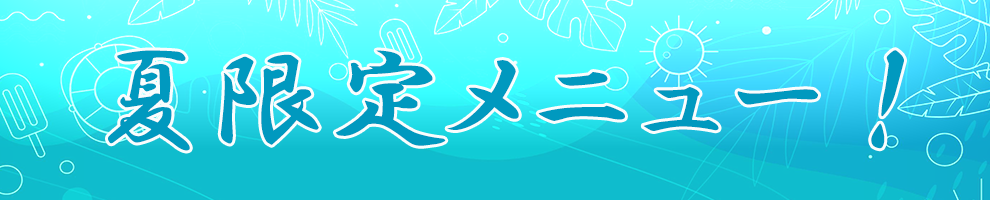
<style>
.page{position:relative;width:990px;height:200px}
.page>*{position:absolute;margin:0}
.t1{font:120px "HGPGyoshotai";color:#0099bf}
</style>
<div class="page">
<p class="t1" style="left:108px;top:50px;width:796px;height:101px">夏限定メニュー！</p>
</div>
